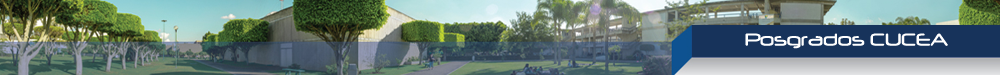
<style>
.page{position:relative;width:1000px;height:75px}
.page>*{position:absolute;margin:0}
.t1{font:20px "Neuropol";color:#ffffff}
</style>
<div class="page">
<p class="t1" style="left:745px;top:33px;width:203px;height:16px">Posgrados CUCEA</p>
</div>
